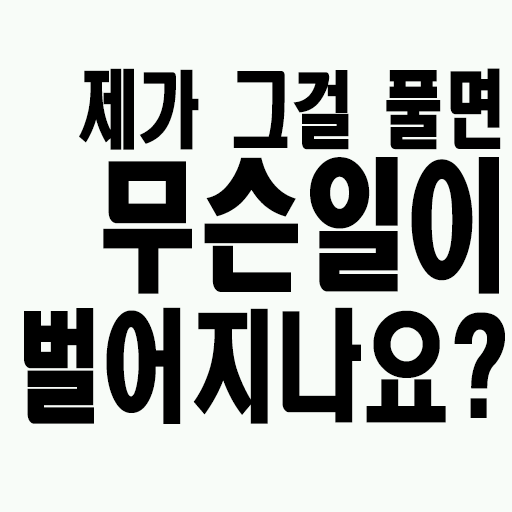
<style>
.page{position:relative;width:512px;height:512px;background:#f8fcf8}
.page>*{position:absolute;margin:0}
.t1{font:84.6px "HeadlineR-HM";color:#000000;scale:0.72 1}
.t2{font:142.2px "HeadlineR-HM";color:#000000;scale:0.72 1}
.t3{font:120.6px "HeadlineR-HM";color:#000000;scale:0.72 1}
</style>
<div class="page">
<p class="t1" style="left:79px;top:68px;width:422px;height:82px">제가 그걸 풀면</p>
<p class="t2" style="left:103px;top:157px;width:396px;height:137px">무슨일이</p>
<p class="t3" style="left:24px;top:307px;width:481px;height:117px">벌어지나요?</p>
</div>
